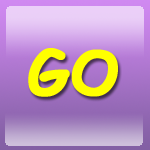
<style>
.page{position:relative;width:150px;height:150px}
.page>*{position:absolute;margin:0}
.t1{font:60px "ComicSansMS-Bold";color:#ffff00;font-weight:bold}
</style>
<div class="page">
<p class="t1" style="left:28px;top:48px;width:90px;height:49px">GO</p>
</div>
